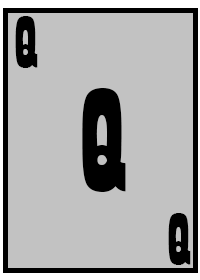
<style>
.page{position:relative;width:200px;height:280px;background:#c2c2c2}
.page>*{position:absolute;margin:0}
.t1{font:75px "Playbill";letter-spacing:-0.1em;color:#000000}
.t2{font:150px "Playbill";letter-spacing:-0.1em;color:#000000}
</style>
<div class="page">
<p class="t1" style="left:15px;top:16px;width:23px;height:52px">Q</p>
<p class="t2" style="left:82px;top:88px;width:44px;height:104px">Q</p>
<p class="t1" style="left:168px;top:213px;width:23px;height:52px">Q</p>
</div>
